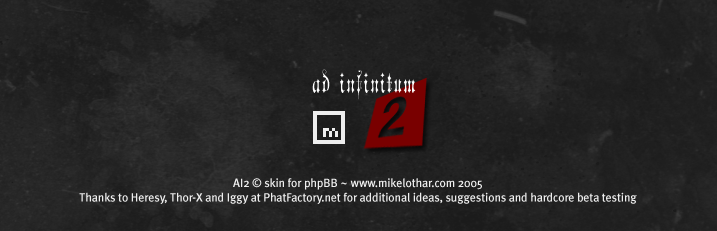
<style>
.page{position:relative;width:717px;height:231px}
.page>*{position:absolute;margin:0}
.t1{font:12px "MetaPlusMedium-Roman";letter-spacing:-0.01em;color:#eeeeee}
</style>
<div class="page">
<p class="t1" style="left:79px;top:178px;width:558px;height:26px;text-align:center">AI2 © skin for phpBB ~ www.mikelothar.com 2005<br>Thanks to Heresy, Thor-X and Iggy at PhatFactory.net for additional ideas, suggestions and hardcore beta testing</p>
</div>
